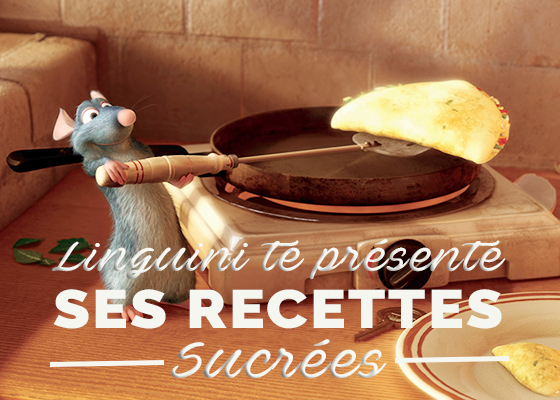
<style>
.page{position:relative;width:560px;height:400px}
.page>*{position:absolute;margin:0}
.t1{font:41.4px "AveBetwanPERSONALUSEONLY";letter-spacing:0.04em;color:#f5f6f0;scale:1.11 1}
.t2{font:54px "Raleway-Black";letter-spacing:0.04em;color:#f5f6f0;scale:1.11 1}
.t3{font:50.4px "AveBetwanPERSONALUSEONLY";letter-spacing:0.04em;color:#f5f6f0;scale:1.11 1}
</style>
<div class="page">
<p class="t1" style="left:52px;top:239px;width:454px;height:41px">Linguini te présente</p>
<p class="t2" style="left:53px;top:289px;width:449px;height:40px">SES RECETTES</p>
<p class="t3" style="left:171px;top:339px;width:216px;height:40px">Sucrées</p>
</div>
